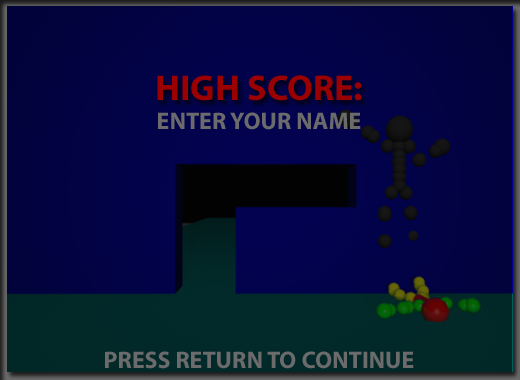
<style>
.page{position:relative;width:520px;height:380px}
.page>*{position:absolute;margin:0}
.t1{font:36px "MyriadPro-Bold";color:#9a0000;text-transform:uppercase}
.t2{font:24px "MyriadPro-Bold";color:#6c6b6b;text-transform:uppercase}
</style>
<div class="page">
<p class="t1" style="left:157px;top:75px;width:205px;height:26px">High Score:</p>
<p class="t2" style="left:158px;top:112px;width:203px;height:18px">Enter Your Name</p>
<p class="t2" style="left:105px;top:351px;width:309px;height:18px">Press RETURN to continue</p>
</div>
